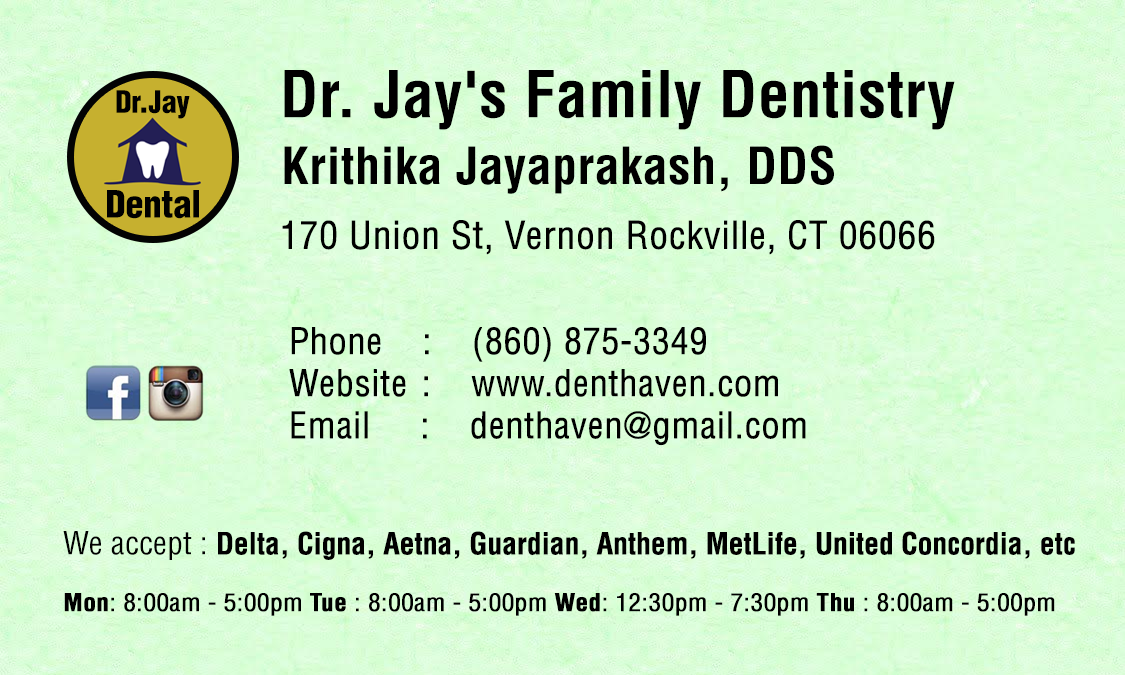
<style>
.page{position:relative;width:1125px;height:675px}
.page>*{position:absolute;margin:0}
.t1{font:63px "HelveticaLT-Condensed-Bold";letter-spacing:0.01em;color:#000000}
.t2{font:30.1px "HelveticaLT-Condensed-Black";letter-spacing:-0.01em;color:#000000}
.t3{font:50.1px "HelveticaLT-Condensed-Bold";letter-spacing:0.01em;color:#000000}
.t4{font:36.7px "HelveticaLT-Condensed-Black";letter-spacing:-0.01em;color:#000000}
.t5{font:37.3px "HelveticaLT-Condensed";color:#000000;font-weight:bold}
.t6{font:35.4px/42.1px "HelveticaLT-Condensed";color:#000000;font-weight:bold}
.t7{font:29.2px "HelveticaLT-Condensed-Bold";letter-spacing:-0.025em;color:#000000;font-weight:bold}
.t8{font:31.1px "HelveticaLT-Condensed";letter-spacing:0.005em;color:#000000}
.t9{font:24px "HelveticaLT-Condensed";color:#000000;font-weight:bold;scale:1.03 1}
.t10{font:24px "HelveticaLT-Condensed-Bold";color:#000000;font-weight:bold;scale:1.03 1}
</style>
<div class="page">
<p class="t1" style="left:284px;top:70px;width:671px;height:60px">Dr. Jay's Family Dentistry</p>
<p class="t2" style="left:116px;top:90px;width:74px;height:29px">Dr.Jay</p>
<p class="t3" style="left:284px;top:145px;width:550px;height:49px">Krithika Jayaprakash, DDS</p>
<p class="t4" style="left:107px;top:190px;width:92px;height:29px">Dental</p>
<p class="t5" style="left:282px;top:220px;width:653px;height:35px">170 Union St, Vernon Rockville, CT 06066</p>
<p class="t6" style="left:289px;top:327px;width:517px;height:119px">Phone    :    (860) 875-3349<br>Website :    www.denthaven.com<br>Email     :    denthaven@gmail.com</p>
<p class="t7" style="left:63px;top:531px;width:1012px;height:29px"><span class="t8">We accept : </span>Delta, Cigna, Aetna, Guardian, Anthem, MetLife, United Concordia, etc</p>
<p class="t9" style="left:64px;top:593px;width:991px;height:23px"><span class="t10">Mon</span>: 8:00am - 5:00pm <span class="t10">Tue</span> : 8:00am - 5:00pm <span class="t10">Wed</span>: 12:30pm - 7:30pm <span class="t10">Thu</span> : 8:00am - 5:00pm</p>
</div>
